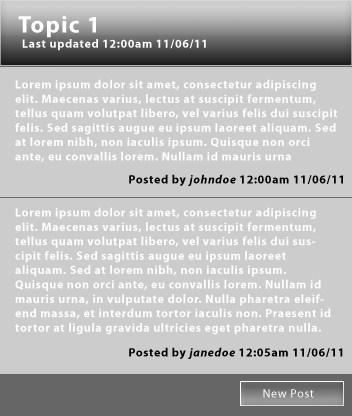
<style>
.page{position:relative;width:352px;height:416px;background:#cccccc}
.page>*{position:absolute;margin:0}
.t1{font:24px "MyriadPro-Bold";letter-spacing:0.05em;color:#ffffff}
.t2{font:12px "MyriadPro-Bold";letter-spacing:0.05em;color:#ffffff}
.t3{font:12px "MyriadPro-Bold";letter-spacing:0.05em;color:#000000}
.t4{font:12px "MyriadPro-BoldIt";letter-spacing:0.05em;color:#000000}
.t5{font:12px "MyriadPro-Regular";letter-spacing:0.05em;color:#ffffff}
</style>
<div class="page">
<p class="t1" style="left:18px;top:15px;width:78px;height:23px">Topic 1</p>
<p class="t2" style="left:22px;top:39px;width:184px;height:12px">Last updated 12:00am 11/06/11</p>
<p class="t2" style="left:15px;top:79px;width:323px;height:83px">Lorem ipsum dolor sit amet, consectetur adipiscing elit. Maecenas varius, lectus at suscipit fermentum, tellus quam volutpat libero, vel varius felis dui suscipit felis. Sed sagittis augue eu ipsum laoreet aliquam. Sed at lorem nibh, non iaculis ipsum. Quisque non orci ante, eu convallis lorem. Nullam id mauris urna</p>
<p class="t3" style="left:129px;top:174px;width:214px;height:12px">Posted by <span class="t4">johndoe </span>12:00am 11/06/11</p>
<p class="t2" style="left:15px;top:207px;width:316px;height:128px">Lorem ipsum dolor sit amet, consectetur adipiscing elit. Maecenas varius, lectus at suscipit fermentum, tellus quam volutpat libero, vel varius felis dui suscipit felis. Sed sagittis augue eu ipsum laoreet aliquam. Sed at lorem nibh, non iaculis ipsum. Quisque non orci ante, eu convallis lorem. Nullam id mauris urna, in vulputate dolor. Nulla pharetra eleifend massa, et interdum tortor iaculis non. Praesent id tortor at ligula gravida ultricies eget pharetra nulla. <span class="t3">Aliquam erat volutpat. Donec pellentesque consequat nisi, sed malesuada enim pellentesque ac. Nam mattis feugiat enim sit amet aliquam. Mauris lobortis, lorem vel rhoncus sollicitudin, erat nulla scelerisque justo, aliquet fermentum velit nisi non lacus. In eros est, tempus sed auctor eget, laoreet ut odio.</span></p>
<p class="t3" style="left:129px;top:347px;width:214px;height:12px">Posted by <span class="t4">janedoe </span>12:05am 11/06/11</p>
<p class="t5" style="left:263px;top:389px;width:51px;height:9px">New Post</p>
</div>
